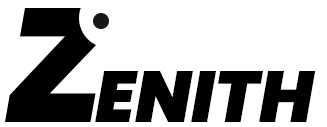
<style>
.page{position:relative;width:327px;height:127px;background:#ffffff}
.page>*{position:absolute;margin:0}
.t1{font:72px "Poppins-BlackItalic";color:#000000}
</style>
<div class="page">
<p class="t1" style="left:95px;top:71px;width:221px;height:51px">ENITH</p>
</div>
